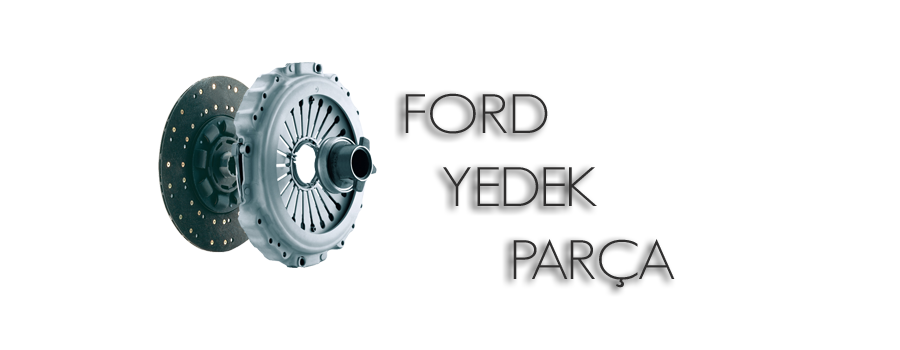
<style>
.page{position:relative;width:900px;height:350px;background:#ffffff}
.page>*{position:absolute;margin:0}
.t1{font:54.4px "GeosansLight";color:#2f2e2e;scale:1.14 1}
</style>
<div class="page">
<p class="t1" style="left:405px;top:93px;width:143px;height:41px">FORD</p>
<p class="t1" style="left:443px;top:167px;width:154px;height:39px">YEDEK</p>
<p class="t1" style="left:513px;top:239px;width:162px;height:49px">PARÇA</p>
</div>
